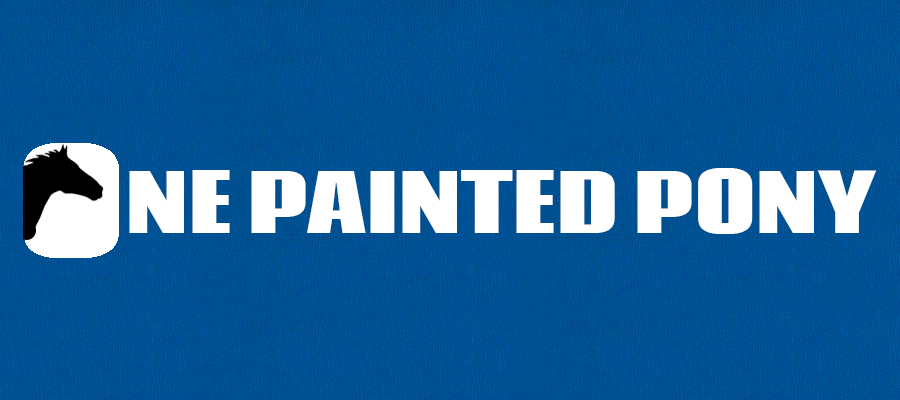
<style>
.page{position:relative;width:900px;height:400px}
.page>*{position:absolute;margin:0}
.t1{font:80px "Coda-Heavy";letter-spacing:0.01em;color:#ffffff;text-transform:uppercase}
</style>
<div class="page">
<p class="t1" style="left:129px;top:168px;width:748px;height:66px">ne painted pony</p>
</div>
